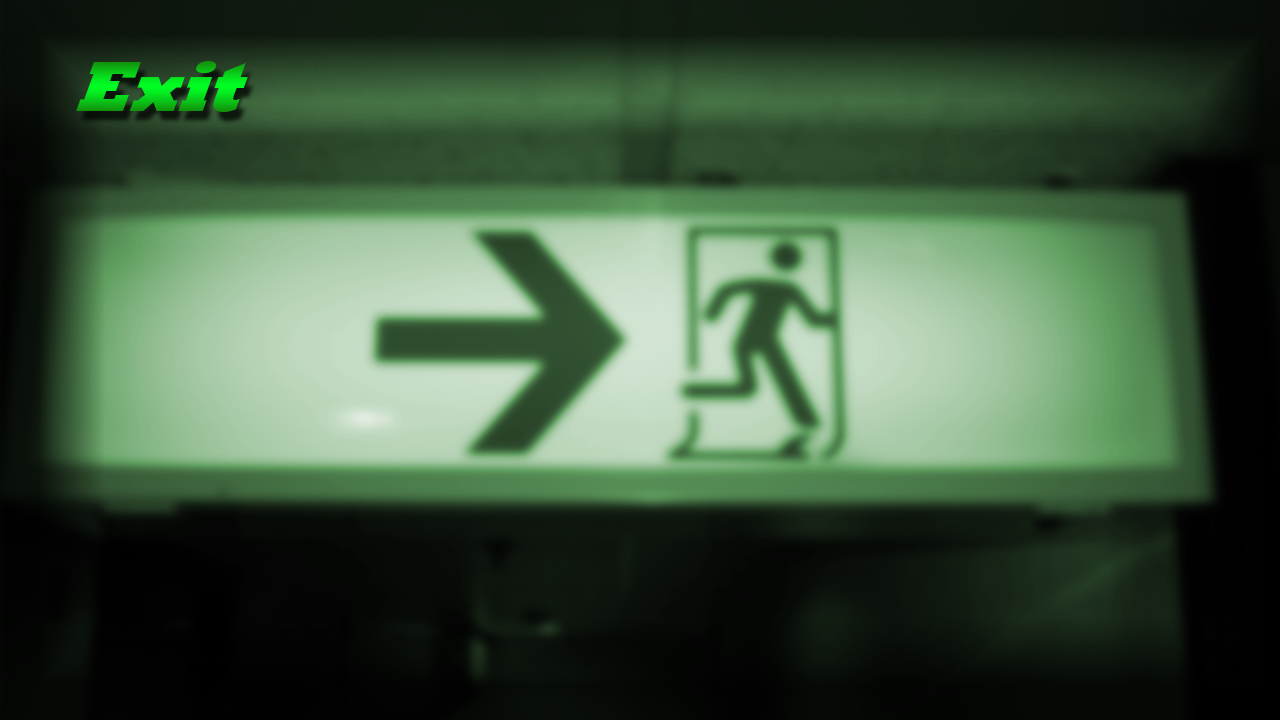
<style>
.page{position:relative;width:1280px;height:720px}
.page>*{position:absolute;margin:0}
.t1{font:76.6px "Rockwell-ExtraBold";scale:0.94 1}
</style>
<div class="page">
<p class="t1" style="left:76px;top:61px;width:172px;height:51px">Exit</p>
</div>
